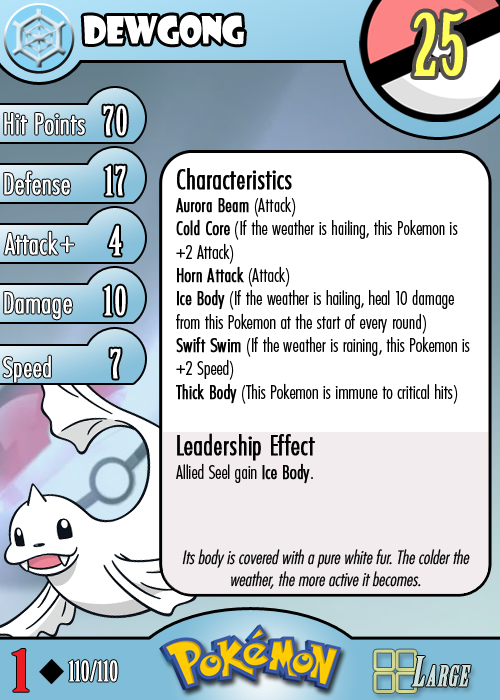
<style>
.page{position:relative;width:500px;height:700px;background:#ffffff}
.page>*{position:absolute;margin:0}
.t1{font:36.7px "ShowcardGothic-Reg";letter-spacing:-0.025em;color:#ffffff;scale:0.91 1}
.t2{font:83.3px "BirchStd";letter-spacing:0.025em;color:#fffd59;font-weight:bold}
.t3{font:27.8px "Futura-CondensedLight";color:#ffffff;font-weight:bold}
.t4{font:38.9px "BirchStd";letter-spacing:0.035em;color:#ffffff;font-weight:bold}
.t5{font:19.4px "FuturaCondensedBQ-Light";color:#010101}
.t6{font:27.8px "FuturaCondensedBQ-Light";color:#010101;font-weight:bold}
.t7{font:19.4px "FuturaCondensedBQ-Light";color:#010101;font-weight:bold}
.t8{font:30.6px "Futura-CondensedLight";color:#ffffff;font-weight:bold}
.t9{font:27.8px "FuturaCondensedBQ-Light";color:#ffffff;font-weight:bold}
.t10{font:18.1px "Futura-CondensedLight";color:#010101;font-style:italic}
.t11{font:55.6px "BirchStd";color:#ed1c24;font-weight:bold;scale:1.5 1}
.t12{font:27.8px "BirchStd";color:#ffffff;font-weight:bold}
</style>
<div class="page">
<p class="t1" style="left:83px;top:15px;width:161px;height:30px">dewgong</p>
<p class="t2" style="left:414px;top:12px;width:50px;height:64px">25</p>
<p class="t3" style="left:4px;top:113px;width:81px;height:22px">Hit Points</p>
<p class="t4" style="left:103px;top:105px;width:24px;height:31px">70</p>
<p class="t3" style="left:4px;top:171px;width:66px;height:24px">Defense</p>
<p class="t4" style="left:105px;top:165px;width:21px;height:31px">17</p>
<p class="t5" style="left:176px;top:168px;width:294px;height:316px"><span class="t6">Characteristics<br></span><span class="t7">Aurora Beam</span> (Attack)<br><span class="t7">Cold Core</span> (If the weather is hailing, this Pokemon is +2 Attack)<br><span class="t7">Horn Attack</span> (Attack)<br><span class="t7">Ice Body</span> (If the weather is hailing, heal 10 damage from this Pokemon at the start of every round)<br><span class="t7">Swift Swim </span>(If the weather is raining, this Pokemon is +2 Speed)<br><span class="t7">Thick Body</span> (This Pokemon is immune to critical hits)<br><br><span class="t6">Leadership Effect<br></span>Allied Seel gain <span class="t7">Ice Body</span>.</p>
<p class="t3" style="left:4px;top:231px;width:54px;height:24px">Attack</p>
<p class="t4" style="left:109px;top:225px;width:13px;height:31px">4</p>
<p class="t8" style="left:60px;top:236px;width:14px;height:17px">+</p>
<p class="t3" style="left:4px;top:292px;width:68px;height:28px">Damage</p>
<p class="t4" style="left:104px;top:285px;width:22px;height:31px">10</p>
<p class="t4" style="left:110px;top:348px;width:11px;height:31px">7</p>
<p class="t9" style="left:3px;top:355px;width:48px;height:28px">Speed</p>
<p class="t10" style="left:182px;top:549px;width:288px;height:40px;text-align:center">Its body is covered with a pure white fur. The colder the weather, the more active it becomes.</p>
<p class="t11" style="left:12px;top:649px;width:17px;height:43px">1</p>
<p class="t12" style="left:68px;top:660px;width:50px;height:22px">110/110</p>
</div>
